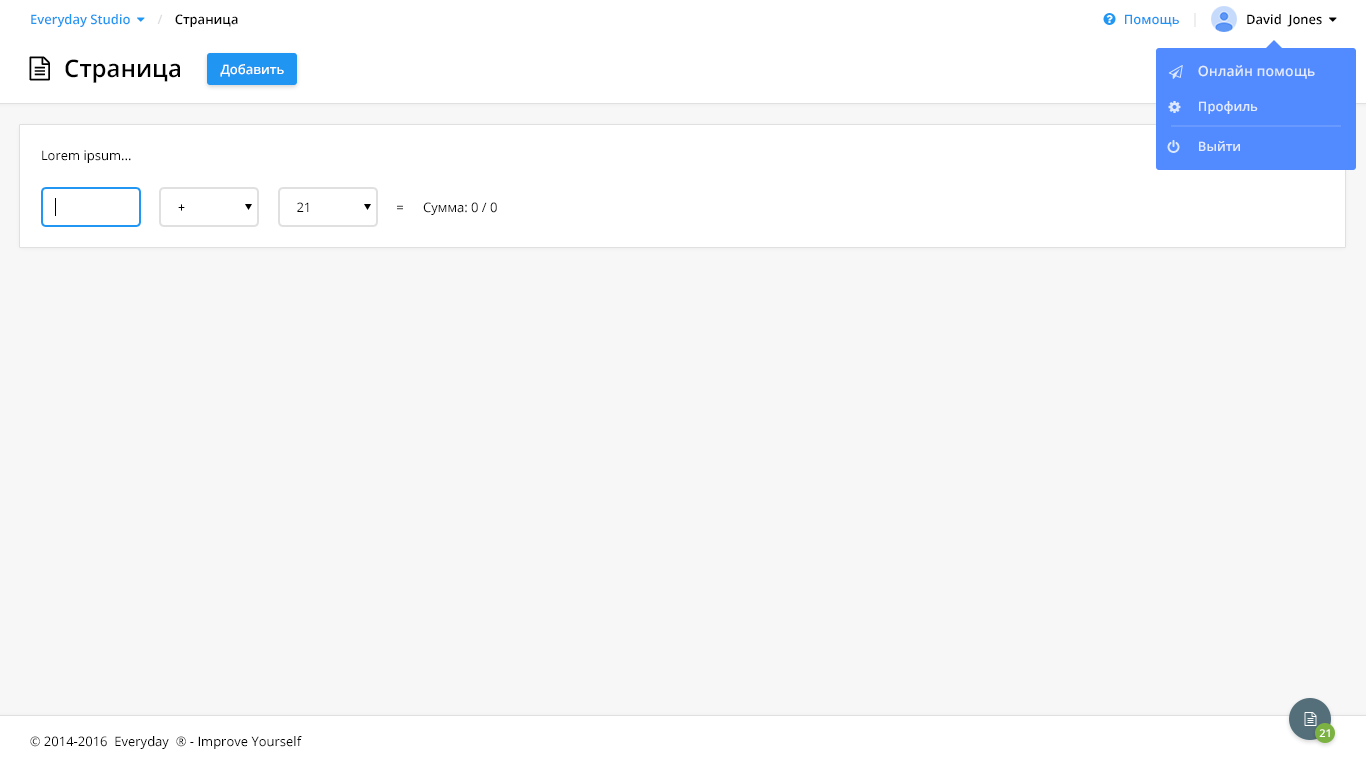
<style>
.page{position:relative;width:1366px;height:768px;background:#f7f7f7}
.page>*{position:absolute;margin:0}
.t1{font:13px "OpenSans-Semibold";color:#2196f3}
.t2{font:13px "OpenSans-Semibold";color:#dddddd}
.t3{font:13px "OpenSans-Semibold";color:#000000}
.t4{font:24px "OpenSans-Semibold";color:#000000}
.t5{font:13px "OpenSans-Semibold";color:#ffffff}
.t6{font:14px "OpenSans-Semibold";color:#e3ebff}
.t7{font:13px "OpenSans-Semibold";color:#e3ebff}
.t8{font:13px "OpenSans";color:#000000}
.t9{font:13px "OpenSans"}
.t10{font:11px "OpenSans-Semibold";color:#ffffff}
</style>
<div class="page">
<p class="t1" style="left:31px;top:14px;width:99px;height:13px">Everyday Studio</p>
<p class="t2" style="left:157px;top:14px;width:6px;height:10px">/</p>
<p class="t3" style="left:175px;top:14px;width:63px;height:13px">Страница</p>
<p class="t1" style="left:1125px;top:14px;width:54px;height:13px">Помощь</p>
<p class="t3" style="left:1247px;top:14px;width:75px;height:13px">David  Jones</p>
<p class="t4" style="left:65px;top:59px;width:115px;height:24px">Страница</p>
<p class="t5" style="left:220px;top:64px;width:64px;height:13px">Добавить</p>
<p class="t6" style="left:1198px;top:65px;width:117px;height:14px">Онлайн помощь</p>
<p class="t7" style="left:1199px;top:101px;width:59px;height:13px">Профиль</p>
<p class="t8" style="left:42px;top:150px;width:89px;height:13px">Lorem ipsum...</p>
<p class="t7" style="left:1199px;top:141px;width:41px;height:10px">Выйти</p>
<p class="t8" style="left:178px;top:204px;width:7px;height:7px">+</p>
<p class="t8" style="left:297px;top:202px;width:12px;height:10px">21</p>
<p class="t9" style="left:397px;top:205px;width:6px;height:5px">=</p>
<p class="t8" style="left:423px;top:202px;width:74px;height:13px">Сумма: 0 / 0</p>
<p class="t8" style="left:30px;top:736px;width:272px;height:13px">© 2014-2016  Everyday  ® - Improve Yourself</p>
<p class="t10" style="left:1319px;top:729px;width:11px;height:8px">21</p>
</div>
